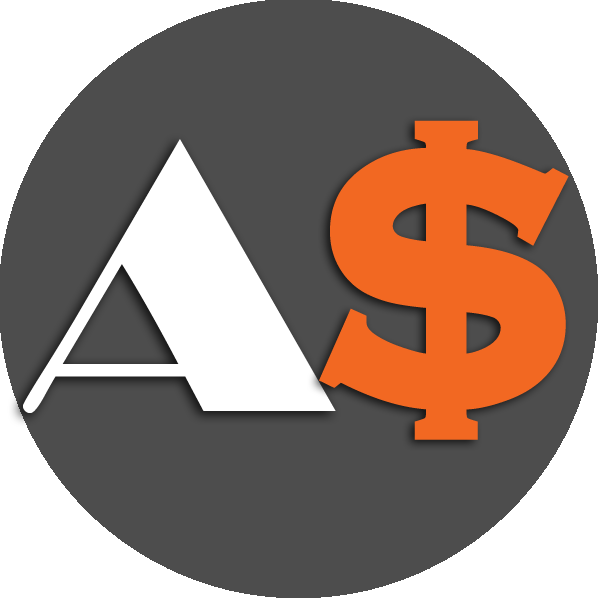
<style>
.page{position:relative;width:600px;height:600px;background:#4d4d4d}
.page>*{position:absolute;margin:0}
.t1{font:360px "UniversalSerif";color:#f26822}
.t2{font:360px "BroadwayBT-Regular";color:#ffffff}
</style>
<div class="page">
<p class="t1" style="left:319px;top:120px;width:250px;height:320px">$</p>
<p class="t2" style="left:23px;top:139px;width:313px;height:274px">A</p>
</div>
